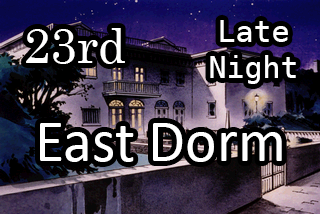
<style>
.page{position:relative;width:320px;height:214px;background:#000000}
.page>*{position:absolute;margin:0}
.t1{font:48px "Century";color:#ffffff}
.t2{font:30px "DejaVuSansMono";color:#ffffff}
.t3{font:40px "Calibri";color:#ffffff}
.t4{font:30px/36px "DejaVuSansMono";color:#ffffff}
.t5{font:60px "Calibri";color:#ffffff}
</style>
<div class="page">
<p class="t1" style="left:26px;top:28px;width:99px;height:36px">23rd</p>
<p class="t2" style="left:210px;top:20px;width:86px;height:64px"><span class="t3"> </span><span class="t4">Late</span><br>Night</p>
<p class="t5" style="left:40px;top:123px;width:242px;height:39px">East Dorm</p>
</div>
